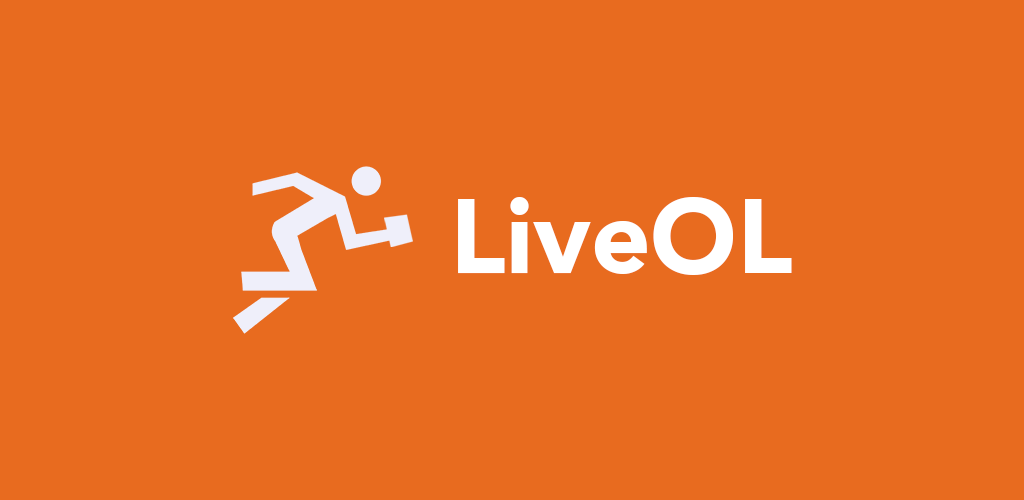
<style>
.page{position:relative;width:1024px;height:500px;background:#e86b1f}
.page>*{position:absolute;margin:0}
.t1{font:103.7px "Avenir-Black";color:#ffffff}
</style>
<div class="page">
<p class="t1" style="left:458px;top:197px;width:334px;height:78px">LiveOL</p>
</div>
